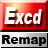
<style>
.page{position:relative;width:48px;height:48px}
.page>*{position:absolute;margin:0}
.t1{font:20px "Arial-Black";color:#ffffff;font-style:italic;scale:0.65 1}
.t2{font:24px "Arial-Black";color:#ffffff;font-style:italic;scale:0.65 1}
.t3{font:12px "Arial-Black";color:#000000}
</style>
<div class="page">
<p class="t1" style="left:4px;top:7px;width:38px;height:17px"><span class="t2">E</span>xcd</p>
<p class="t3" style="left:2px;top:35px;width:44px;height:11px">Remap</p>
</div>
